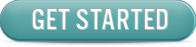
<style>
.page{position:relative;width:196px;height:47px}
.page>*{position:absolute;margin:0}
.t1{font:31px "U.S.101";letter-spacing:0.02em;color:#ffffff;text-transform:uppercase}
</style>
<div class="page">
<p class="t1" style="left:31px;top:8px;width:137px;height:21px">get started</p>
</div>
